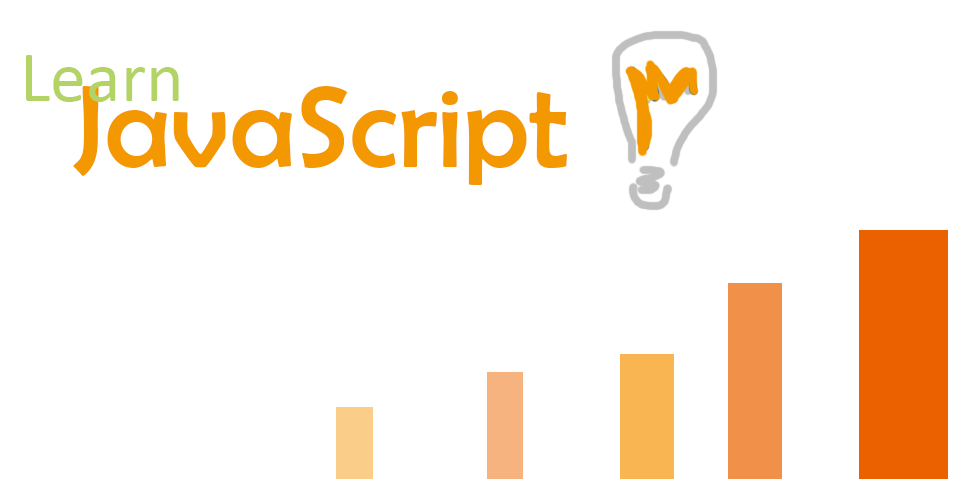
<style>
.page{position:relative;width:960px;height:500px;background:#ffffff}
.page>*{position:absolute;margin:0}
.t1{font:72px "Calibri";color:#b3d465}
.t2{font:118px "BerlinSansFB-Reg";color:#f39800}
</style>
<div class="page">
<p class="t1" style="left:26px;top:55px;width:153px;height:47px">Learn</p>
<p class="t2" style="left:73px;top:86px;width:494px;height:99px">JavaScript</p>
</div>
